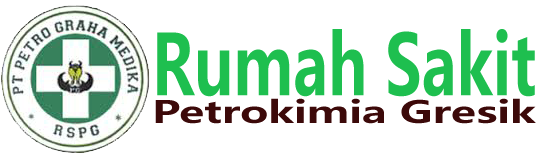
<style>
.page{position:relative;width:544px;height:158px;background:#ffffff}
.page>*{position:absolute;margin:0}
.t1{font:82.9px "MicrosoftYaHeiUI-Bold";color:#1ebf4f;scale:0.73 1}
.t2{font:30.3px "MicrosoftYaHeiUI-Bold";color:#3c0909;scale:1.42 1}
</style>
<div class="page">
<p class="t1" style="left:157px;top:29px;width:378px;height:68px">Rumah Sakit</p>
<p class="t2" style="left:155px;top:98px;width:381px;height:26px">Petrokimia Gresik</p>
</div>
